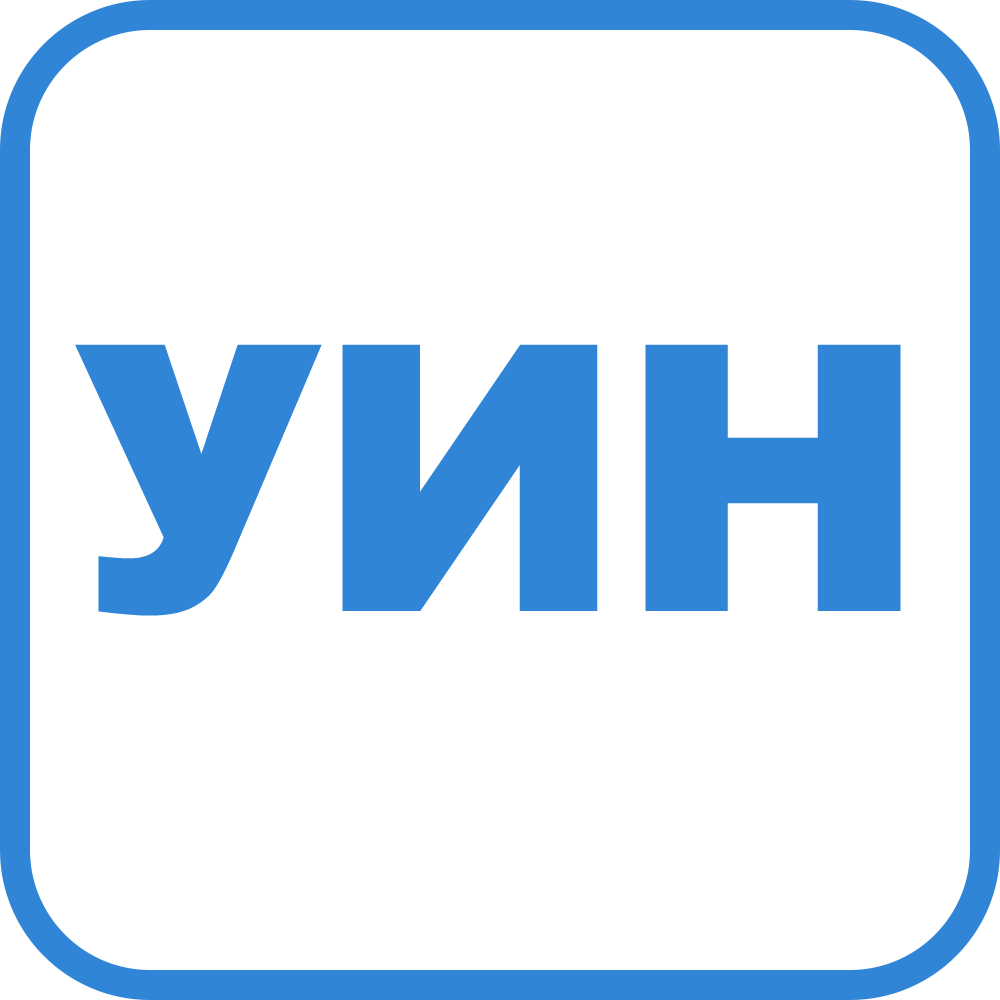
<style>
.page{position:relative;width:1000px;height:1000px;background:#ffffff}
.page>*{position:absolute;margin:0}
.t1{font:372px "Arial-Black";letter-spacing:-0.02em;color:#3085d6}
</style>
<div class="page">
<p class="t1" style="left:75px;top:344px;width:826px;height:272px">УИН</p>
</div>
